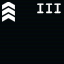
<style>
.page{position:relative;width:64px;height:64px;background:#030709}
.page>*{position:absolute;margin:0}
.t1{font:12px "OCRABeckerRUS-LAT";color:#ffffff}
</style>
<div class="page">
<p class="t1" style="left:37px;top:3px;width:24px;height:11px">III</p>
</div>
